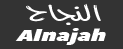
<style>
.page{position:relative;width:123px;height:49px;background:#333333}
.page>*{position:absolute;margin:0}
.t1{font:23.4px "Farah";letter-spacing:0.01em;color:#ffffff;scale:1.8 1}
.t2{font:15.6px "AvenirNextCondensed-HeavyItalic";letter-spacing:-0.015em;color:#ffffff;scale:1.8 1}
</style>
<div class="page">
<p class="t1" style="left:26px;top:3px;width:75px;height:22px">النجاح</p>
<p class="t2" style="left:15px;top:28px;width:91px;height:17px">Alnajah</p>
</div>
